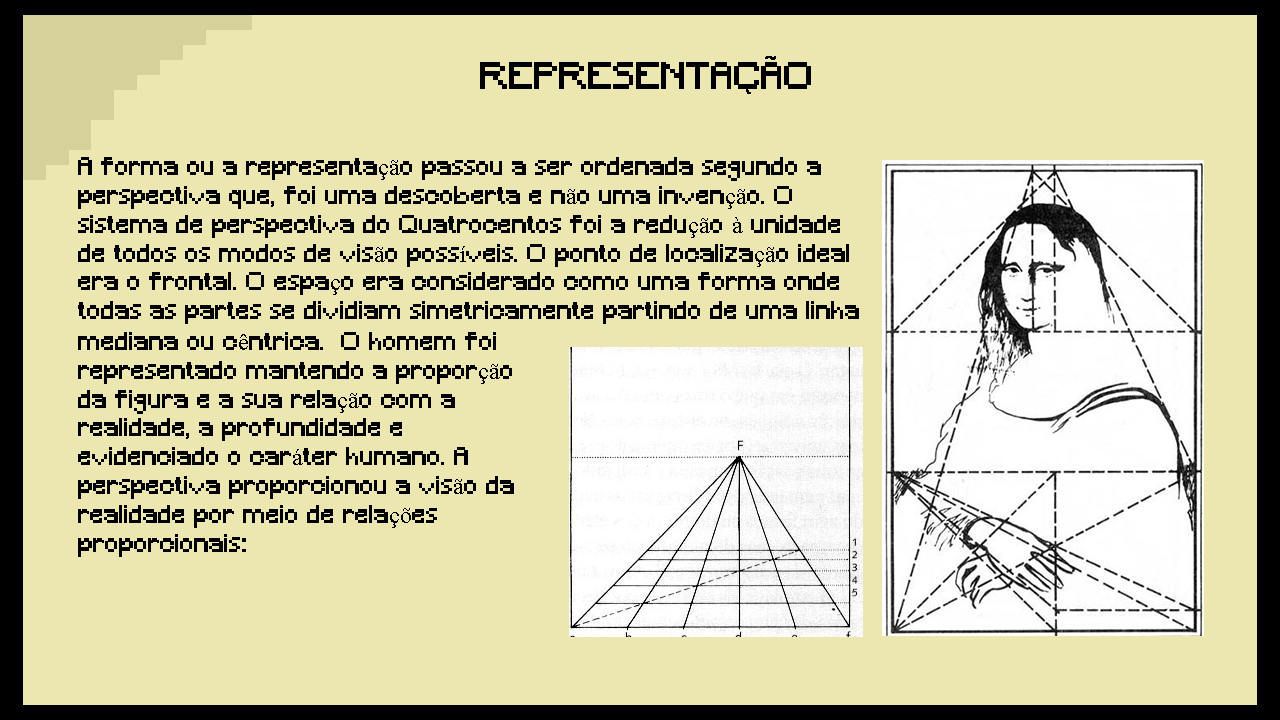
<style>
.page{position:relative;width:1280px;height:720px;background:#ece6b0}
.page>*{position:absolute;margin:0}
.t1{font:36px "Minecraft";color:#000000}
.t2{font:24px "Minecraft";color:#000000}
.t3{font:24px "TimesNewRomanPSMT";color:#000000}
</style>
<div class="page">
<p class="t1" style="left:480px;top:62px;width:331px;height:27px">REPRESENTACAO</p>
<p class="t2" style="left:78px;top:157px;width:781px;height:167px">A forma ou a representa<span class="t3">çã</span>o passou a ser ordenada segundo a perspectiva que, foi uma descoberta e n<span class="t3">ã</span>o uma inven<span class="t3">çã</span>o. O sistema de perspectiva do Quatrocentos foi a redu<span class="t3">çã</span>o <span class="t3">à</span> unidade de todos os modos de vis<span class="t3">ã</span>o poss<span class="t3">í</span>veis. O ponto de localiza<span class="t3">çã</span>o ideal era o frontal. O espa<span class="t3">ç</span>o era considerado como uma forma onde todas as partes se dividiam simetricamente partindo de uma linha mediana ou c<span class="t3">ê</span>ntrica.  O homem foi representado mantendo a propor<span class="t3">çã</span>o da figura e a sua rela<span class="t3">çã</span>o com a realidade, a profundidade e evidenciado o car<span class="t3">á</span>ter humano. A perspectiva proporcionou a vis<span class="t3">ã</span>o da realidade por meio de rela<span class="t3">çõ</span>es proporcionais:</p>
<p class="t2" style="left:78px;top:332px;width:436px;height:225px">mediana ou c<span class="t3">ê</span>ntrica.  O homem foi representado mantendo a propor<span class="t3">çã</span>o da figura e a sua rela<span class="t3">çã</span>o com a realidade, a profundidade e evidenciado o car<span class="t3">á</span>ter humano. A perspectiva proporcionou a vis<span class="t3">ã</span>o da realidade por meio de rela<span class="t3">çõ</span>es proporcionais:</p>
</div>
